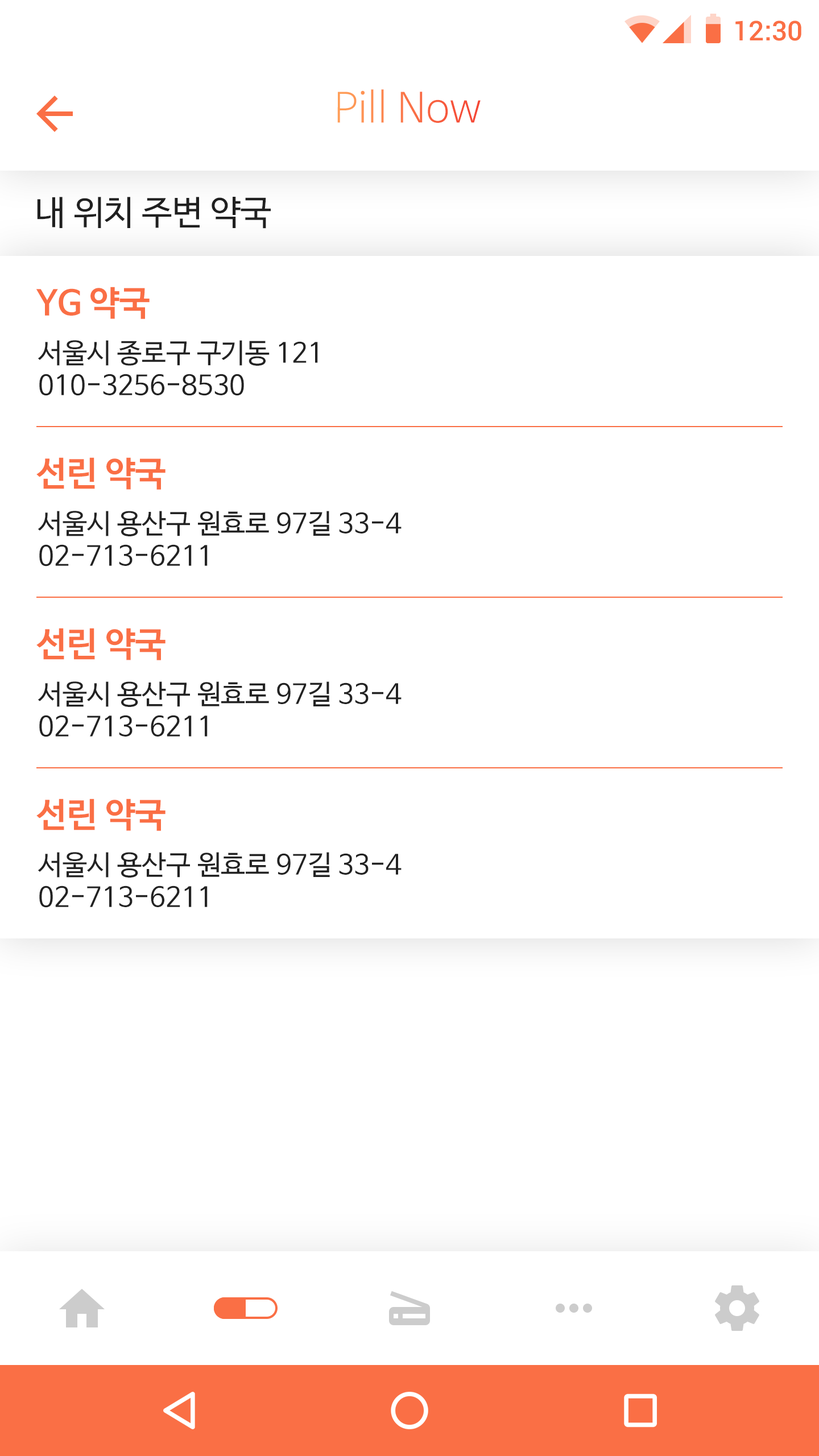
<style>
.page{position:relative;width:819px;height:1456px;background:#ffffff}
.page>*{position:absolute;margin:0}
.t1{font:27.3px "Roboto-Medium";color:#fa6f45}
.t2{font:40.9px "NanumBarunGothicLight"}
.t3{font:34.1px "NanumBarunGothic";color:#202020}
.t4{font:34.1px "NanumBarunGothicBold";color:#fa6f45}
.t5{font:27.3px "NanumBarunGothic";color:#222222}
</style>
<div class="page">
<p class="t1" style="left:735px;top:20px;width:66px;height:21px">12:30</p>
<p class="t2" style="left:337px;top:89px;width:144px;height:34px">Pill Now</p>
<p class="t3" style="left:37px;top:197px;width:234px;height:32px">내 위치 주변 약국</p>
<p class="t4" style="left:36px;top:287px;width:114px;height:32px">YG 약국</p>
<p class="t5" style="left:38px;top:340px;width:280px;height:56px">서울시 종로구 구기동 121<br>010-3256-8530</p>
<p class="t4" style="left:36px;top:457px;width:130px;height:33px">선린 약국</p>
<p class="t5" style="left:38px;top:511px;width:364px;height:55px">서울시 용산구 원효로 97길 33-4<br>02-713-6211</p>
<p class="t4" style="left:36px;top:628px;width:130px;height:32px">선린 약국</p>
<p class="t5" style="left:38px;top:681px;width:364px;height:56px">서울시 용산구 원효로 97길 33-4<br>02-713-6211</p>
<p class="t4" style="left:36px;top:799px;width:130px;height:32px">선린 약국</p>
<p class="t5" style="left:38px;top:852px;width:364px;height:56px">서울시 용산구 원효로 97길 33-4<br>02-713-6211</p>
</div>
